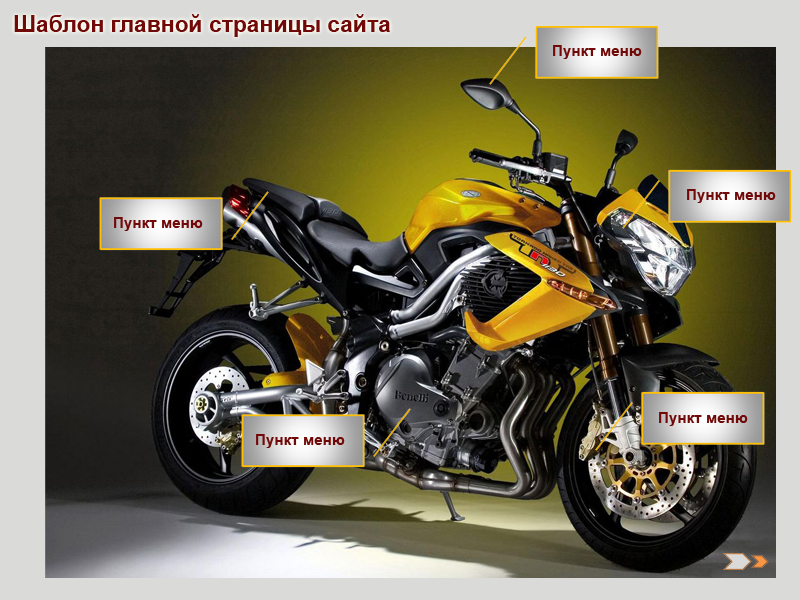
<style>
.page{position:relative;width:800px;height:600px}
.page>*{position:absolute;margin:0}
.t1{font:22.9px "Arial-BoldMT";color:#720909}
.t2{font:15.2px "Arial-BoldMT";color:#720909}
</style>
<div class="page">
<p class="t1" style="left:14px;top:14px;width:376px;height:23px">Шаблон главной страницы сайта</p>
<p class="t2" style="left:553px;top:45px;width:89px;height:14px">Пункт меню</p>
<p class="t2" style="left:687px;top:189px;width:89px;height:14px">Пункт меню</p>
<p class="t2" style="left:114px;top:217px;width:89px;height:14px">Пункт меню</p>
<p class="t2" style="left:659px;top:412px;width:89px;height:14px">Пункт меню</p>
<p class="t2" style="left:256px;top:434px;width:89px;height:14px">Пункт меню</p>
</div>
